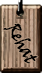
<style>
.page{position:relative;width:42px;height:73px}
.page>*{position:absolute;margin:0}
.t1{font:18px "VinerHandITC";letter-spacing:-0.08em;color:#000000;font-weight:bold;scale:0.9 1}
</style>
<div class="page">
<p class="t1" style="left:3px;top:23px;width:35px;height:41px;rotate:60deg">Rehat</p>
</div>
